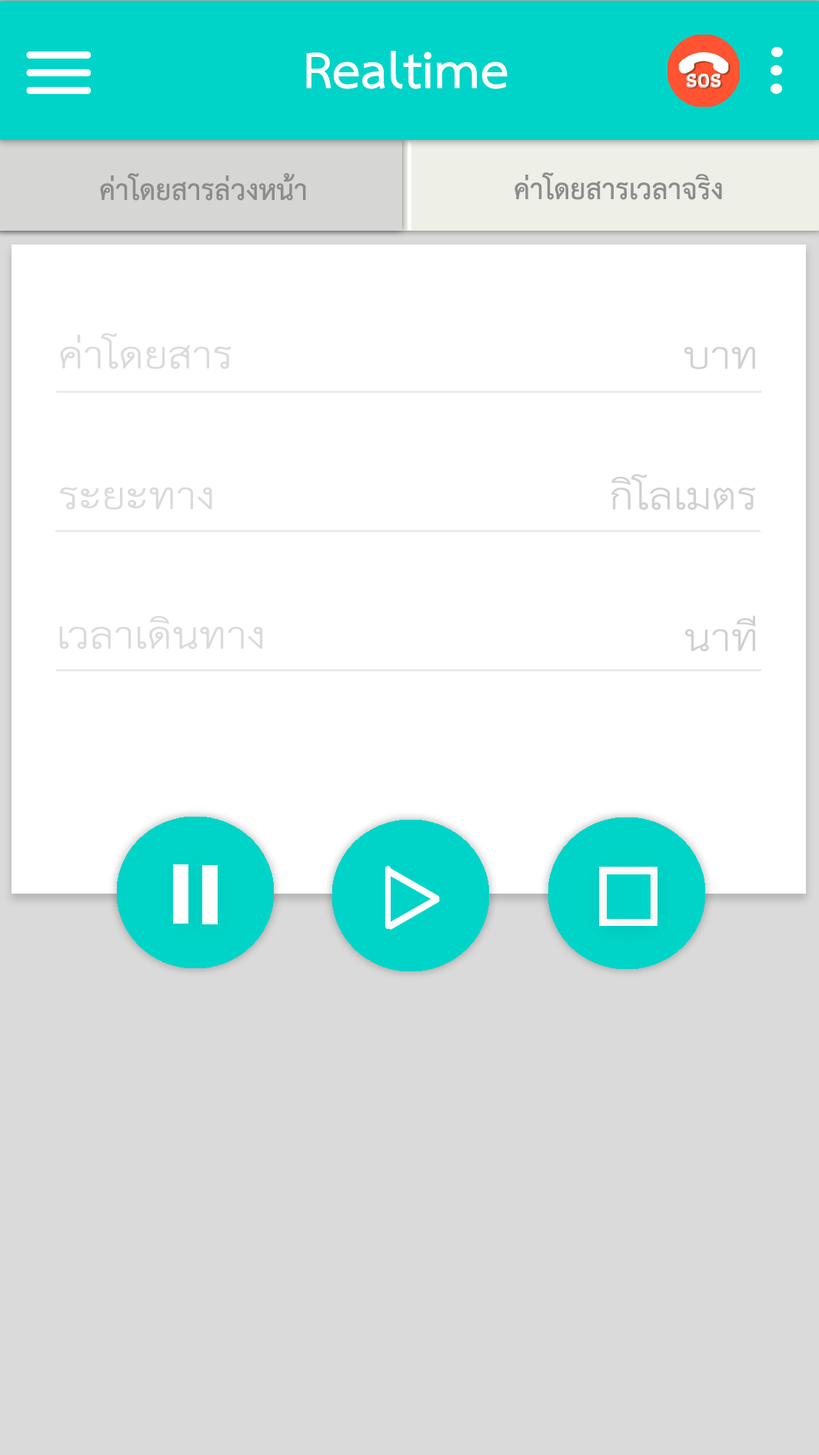
<style>
.page{position:relative;width:819px;height:1455px;background:#ffffff}
.page>*{position:absolute;margin:0}
.t1{font:73.4px "THSarabunPSK-Bold";color:#ffffff}
.t2{font:40.6px "THSarabunPSK-Bold";color:#8d8c8c}
.t3{font:53.9px "THSarabunPSK";color:#dadada;scale:1.19 1}
.t4{font:53.9px "THSarabunPSK";color:#d0d0d0;scale:1.19 1}
.t5{font:158px "THSarabunPSK";color:#ffffff;scale:0.95 1}
</style>
<div class="page">
<p class="t1" style="left:306px;top:51px;width:202px;height:38px">Realtime</p>
<p class="t2" style="left:100px;top:173px;width:206px;height:28px">ค่าโดยสารล่วงหน้า</p>
<p class="t2" style="left:515px;top:172px;width:207px;height:28px">ค่าโดยสารเวลาจริง</p>
<p class="t3" style="left:60px;top:333px;width:172px;height:36px">ค่าโดยสาร</p>
<p class="t4" style="left:684px;top:347px;width:71px;height:22px">บาท</p>
<p class="t4" style="left:612px;top:474px;width:144px;height:36px">กิโลเมตร</p>
<p class="t3" style="left:60px;top:487px;width:152px;height:23px">ระยะทาง</p>
<p class="t3" style="left:59px;top:616px;width:204px;height:33px">เวลาเดินทาง</p>
<p class="t4" style="left:685px;top:615px;width:71px;height:37px">นาที</p>
<p class="t5" style="left:390px;top:869px;width:49px;height:60px">&gt;</p>
</div>
